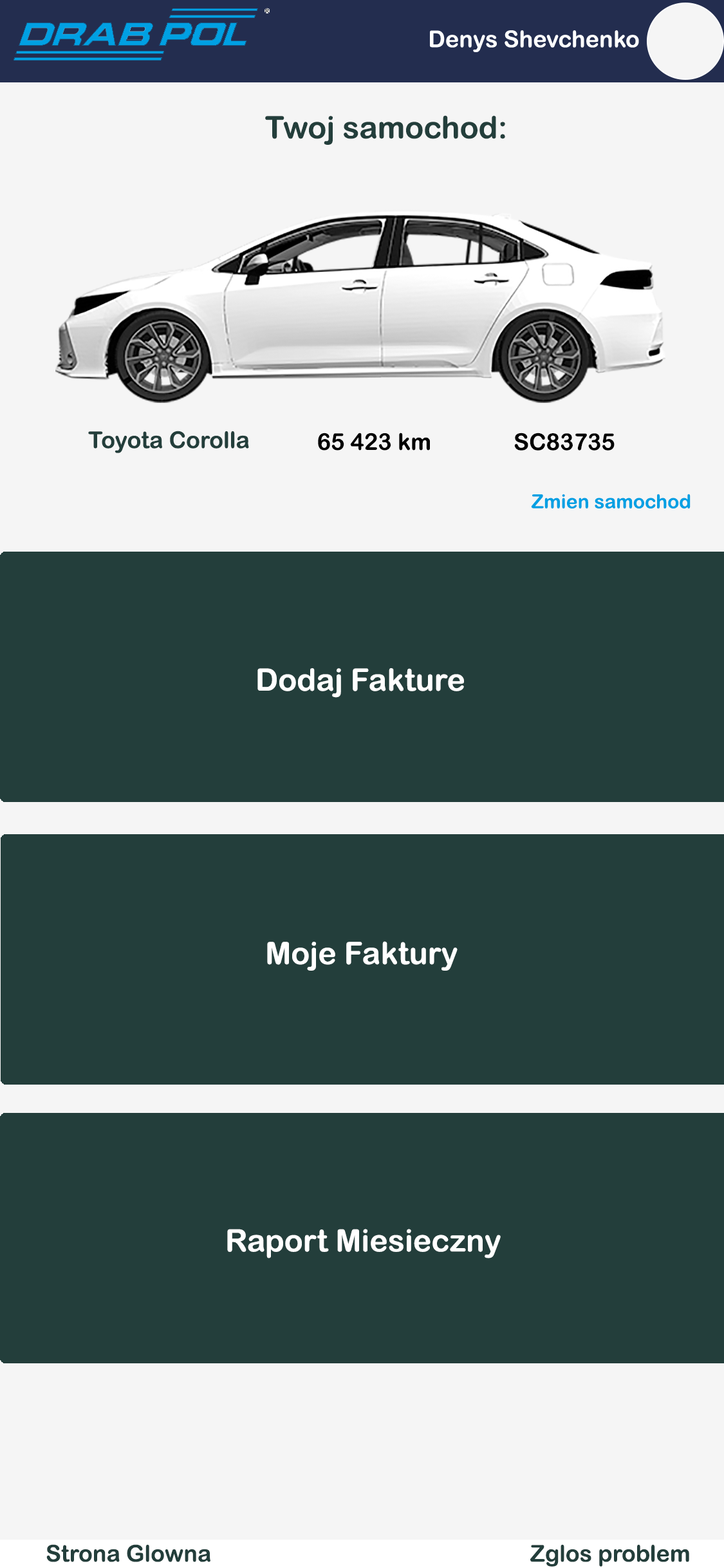
<style>
.page{position:relative;width:724px;height:1568px;background:#233e3b}
.page>*{position:absolute;margin:0}
.t1{font:30.9px "ArialRoundedMTBold";color:#233e3b}
.t2{font:23.2px "ArialRoundedMTBold";color:#233e3b}
.t3{font:23.2px "ArialRoundedMTBold";color:#000000}
.t4{font:19.3px "ArialRoundedMTBold";color:#00a0e3}
.t5{font:30.9px "ArialRoundedMTBold";color:#ffffff}
</style>
<div class="page">
<p class="t1" style="left:265px;top:115px;width:240px;height:30px">Twoj samochod:</p>
<p class="t2" style="left:88px;top:431px;width:161px;height:22px">Toyota Corolla</p>
<p class="t3" style="left:318px;top:433px;width:112px;height:18px">65 423 km</p>
<p class="t3" style="left:514px;top:433px;width:101px;height:18px">SC83735</p>
<p class="t4" style="left:531px;top:494px;width:160px;height:15px">Zmien samochod</p>
<p class="t5" style="left:257px;top:668px;width:207px;height:30px">Dodaj Fakture</p>
<p class="t5" style="left:267px;top:941px;width:191px;height:30px">Moje Faktury</p>
<p class="t5" style="left:227px;top:1229px;width:274px;height:29px">Raport Miesieczny</p>
<p class="t2" style="left:46px;top:1544px;width:164px;height:18px">Strona Glowna</p>
<p class="t2" style="left:530px;top:1544px;width:159px;height:23px">Zglos problem</p>
</div>
